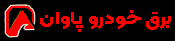
<style>
.page{position:relative;width:175px;height:41px;background:#000000}
.page>*{position:absolute;margin:0}
.t1{font:18.2px "Kalameh-ExtraBold";letter-spacing:0.01em;color:#ff0000;scale:1.12 1}
</style>
<div class="page">
<p class="t1" style="left:40px;top:10px;width:131px;height:22px">برق خودرو پاوان</p>
</div>
